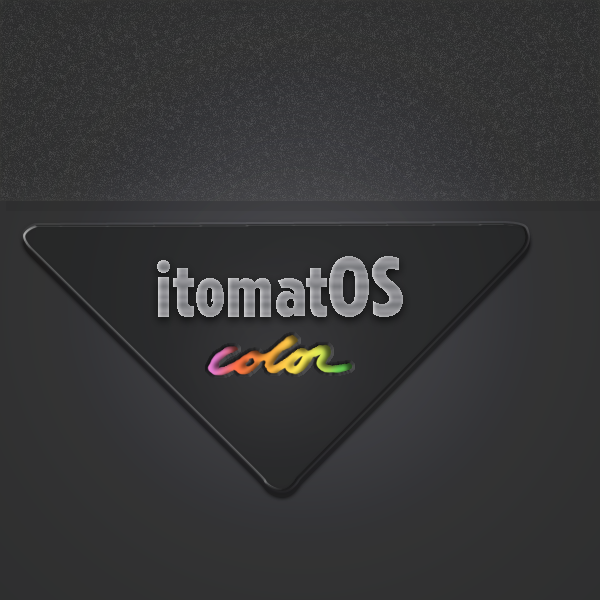
<style>
.page{position:relative;width:600px;height:600px}
.page>*{position:absolute;margin:0}
.t1{font:80px "DUTY-Normal";color:#96969a}
</style>
<div class="page">
<p class="t1" style="left:157px;top:256px;width:246px;height:61px">itomatOS</p>
</div>
